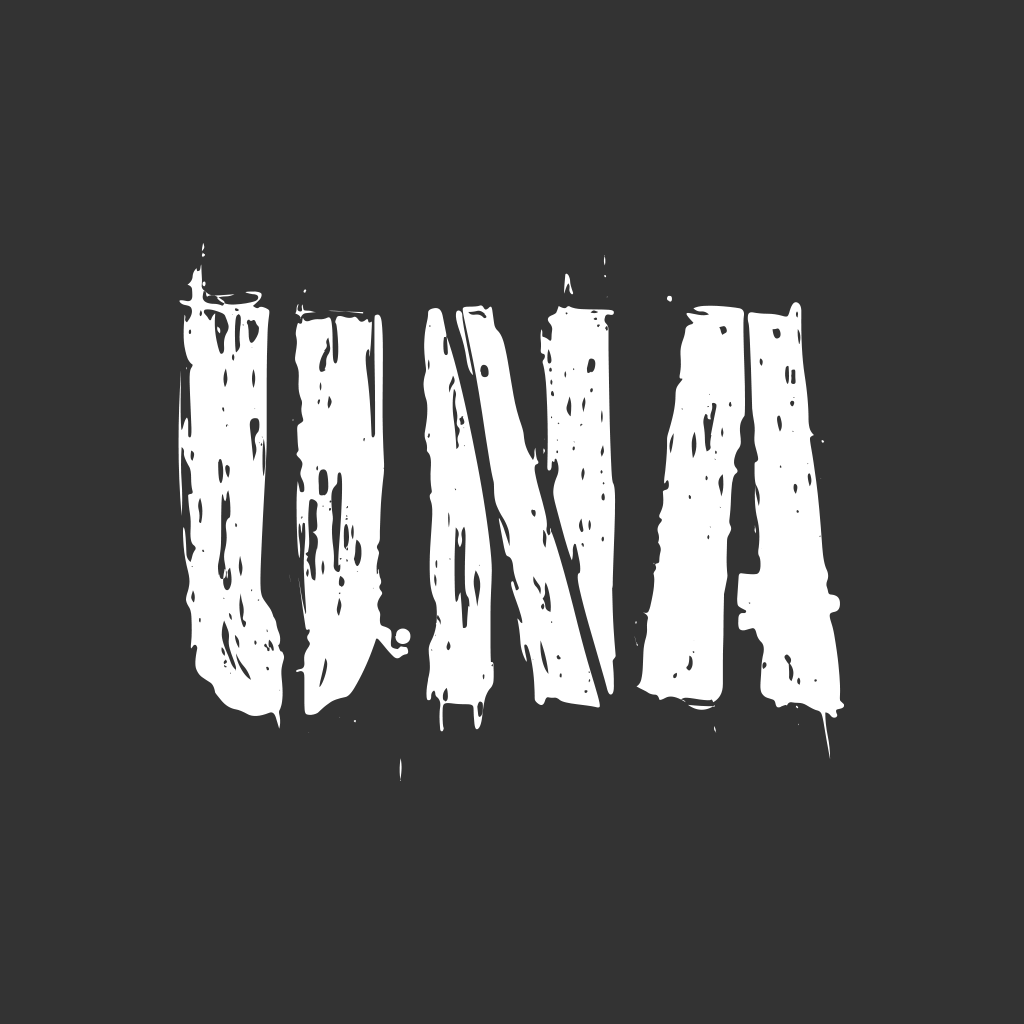
<style>
.page{position:relative;width:1024px;height:1024px;background:#333333}
.page>*{position:absolute;margin:0}
.t1{font:684.8px "VTKSSMASH";color:#ffffff;text-transform:uppercase;scale:0.88 1}
</style>
<div class="page">
<p class="t1" style="left:178px;top:243px;width:667px;height:538px">UNA</p>
</div>
